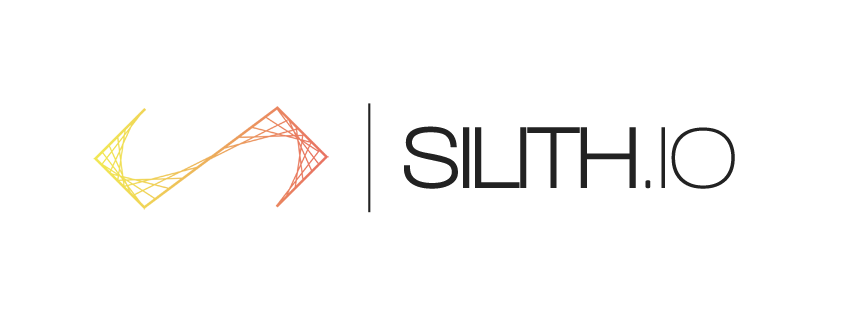
<style>
.page{position:relative;width:851px;height:315px;background:#ffffff}
.page>*{position:absolute;margin:0}
.t1{font:89.4px "WalkwayUltraBold";color:#222222}
.t2{font:89.4px "WalkwayBold";color:#222222}
.t3{font:89.4px "WalkwaySemiBold";color:#222222}
</style>
<div class="page">
<p class="t1" style="left:404px;top:126px;width:331px;height:63px">SILITH<span class="t2">.</span><span class="t3">IO</span></p>
<p class="t1" style="left:404px;top:126px;width:331px;height:63px">SILITH<span class="t2">.</span><span class="t3">IO</span></p>
</div>
